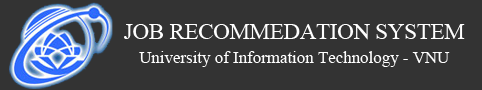
<style>
.page{position:relative;width:482px;height:90px;background:#333333}
.page>*{position:absolute;margin:0}
.t1{font:22.5px "TimesNewRomanPSMT";color:#ffffff}
.t2{font:16.9px "TimesNewRomanPSMT";color:#ffffff}
</style>
<div class="page">
<p class="t1" style="left:124px;top:24px;width:341px;height:16px">JOB RECOMMEDATION SYSTEM</p>
<p class="t2" style="left:139px;top:51px;width:311px;height:16px">University of Information Technology - VNU</p>
</div>
